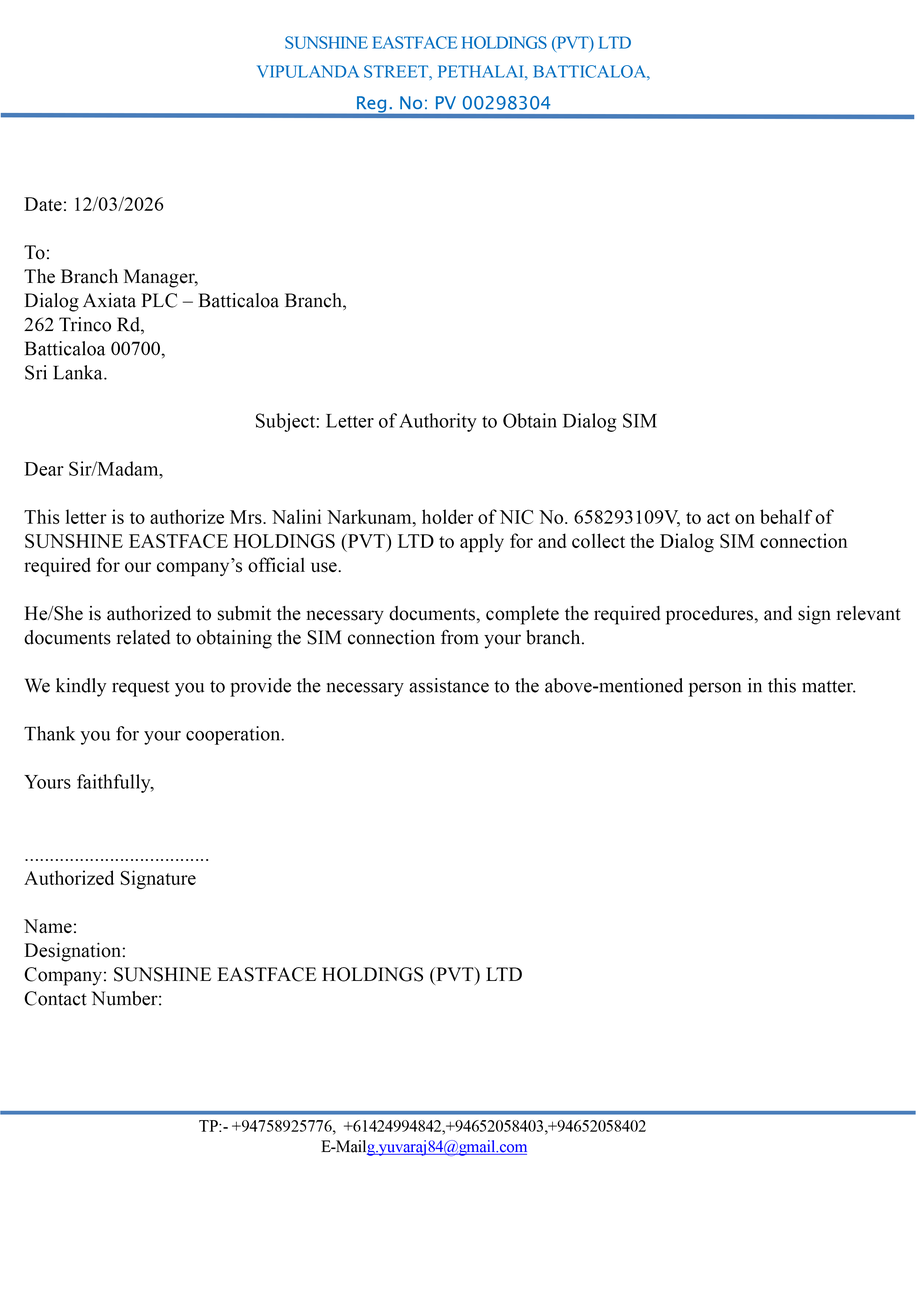
<style>
.page{position:relative;width:918px;height:1299px;background:#ffffff}
.page>*{position:absolute;margin:0}
.t1{font:20.1px "TimesNewRomanPSMT";color:#000000}
</style>
<div class="page">
<p class="t1" style="left:24px;top:197px;width:877px;height:808px">Date: 12/03/2026<br><br>To:<br>The Branch Manager,<br>Dialog Axiata PLC – Batticaloa Branch,<br>262 Trinco Rd,<br>Batticaloa 00700,<br>Sri Lanka.<br><br>                                              Subject: Letter of Authority to Obtain Dialog SIM<br><br>Dear Sir/Madam,<br><br>This letter is to authorize Mrs. Nalini Narkunam, holder of NIC No. 658293109V, to act on behalf of <br>SUNSHINE EASTFACE HOLDINGS (PVT) LTD to apply for and collect the Dialog SIM connection <br>required for our company’s official use.<br><br>He/She is authorized to submit the necessary documents, complete the required procedures, and sign relevant <br>documents related to obtaining the SIM connection from your branch.<br><br>We kindly request you to provide the necessary assistance to the above-mentioned person in this matter.<br><br>Thank you for your cooperation.<br><br>Yours faithfully,<br><br><br>.....................................<br>Authorized Signature<br><br>Name:<br>Designation:<br>Company: SUNSHINE EASTFACE HOLDINGS (PVT) LTD<br>Contact Number:</p>
</div>
